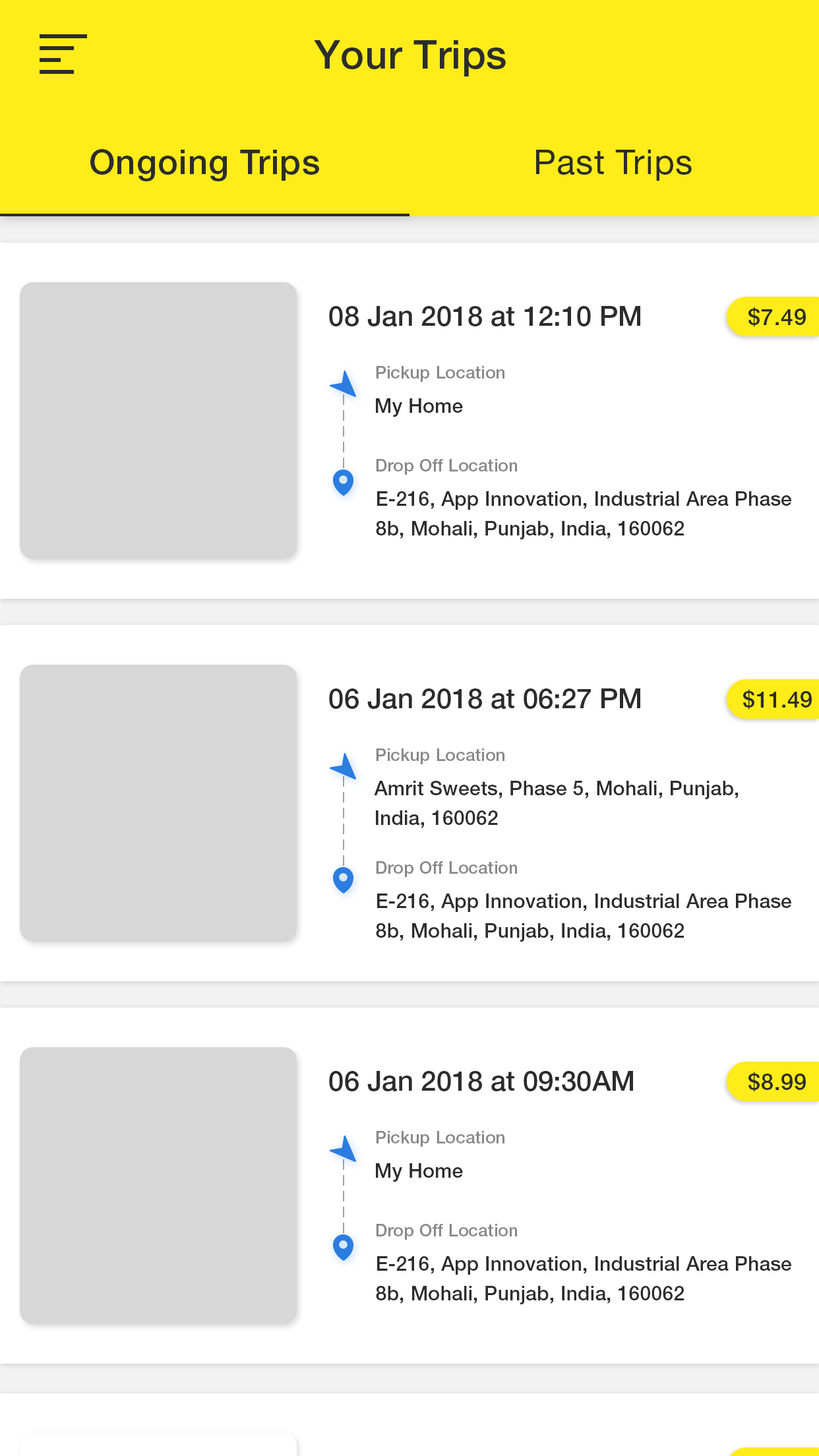
<style>
.page{position:relative;width:819px;height:1456px;background:#ffffff}
.page>*{position:absolute;margin:0}
.t1{font:39.6px "HelveticaNeueLTStd-Md";letter-spacing:0.01em;color:#2c2c2c}
.t2{font:34.3px "HelveticaNeueLTStd-Md";letter-spacing:0.025em;color:#2c2c2c}
.t3{font:34.3px "HelveticaNeueLTStd-Roman";letter-spacing:0.025em;color:#2c2c2c}
.t4{font:27.7px "HelveticaNeueLTStd-Md";color:#2c2c2c}
.t5{font:22.4px "HelveticaNeueLTStd-Md";letter-spacing:0.025em;color:#2c2c2c}
.t6{font:17.1px "HelveticaNeueLTStd-Md";letter-spacing:0.01em;color:#888888}
.t7{font:19.8px "HelveticaNeueLTStd-Md";letter-spacing:0.01em;color:#2c2c2c}
.t8{font:19.8px/29.7px "HelveticaNeueLTStd-Md";letter-spacing:0.01em;color:#2c2c2c}
.t9{font:22.4px "HelveticaNeueLTStd-Md";letter-spacing:0.01em;color:#2c2c2c}
</style>
<div class="page">
<p class="t1" style="left:314px;top:40px;width:192px;height:36px">Your Trips</p>
<p class="t2" style="left:90px;top:149px;width:229px;height:32px">Ongoing Trips</p>
<p class="t3" style="left:536px;top:150px;width:156px;height:31px">Past Trips</p>
<p class="t4" style="left:329px;top:306px;width:311px;height:20px">08 Jan 2018 at 12:10 PM</p>
<p class="t5" style="left:748px;top:307px;width:58px;height:20px">$7.49</p>
<p class="t6" style="left:376px;top:366px;width:128px;height:16px">Pickup Location</p>
<p class="t7" style="left:376px;top:398px;width:87px;height:19px">My Home</p>
<p class="t6" style="left:376px;top:459px;width:141px;height:16px">Drop Off Location</p>
<p class="t8" style="left:376px;top:491px;width:415px;height:48px">E-216, App Innovation, Industrial Area Phase<br>8b, Mohali, Punjab, India, 160062</p>
<p class="t4" style="left:329px;top:688px;width:311px;height:21px">06 Jan 2018 at 06:27 PM</p>
<p class="t9" style="left:743px;top:689px;width:69px;height:21px">$11.49</p>
<p class="t6" style="left:376px;top:748px;width:128px;height:16px">Pickup Location</p>
<p class="t8" style="left:374px;top:781px;width:365px;height:47px">Amrit Sweets, Phase 5, Mohali, Punjab,<br>India, 160062</p>
<p class="t6" style="left:376px;top:861px;width:141px;height:16px">Drop Off Location</p>
<p class="t8" style="left:376px;top:894px;width:415px;height:48px">E-216, App Innovation, Industrial Area Phase<br>8b, Mohali, Punjab, India, 160062</p>
<p class="t4" style="left:329px;top:1071px;width:304px;height:20px">06 Jan 2018 at 09:30AM</p>
<p class="t5" style="left:748px;top:1072px;width:58px;height:20px">$8.99</p>
<p class="t6" style="left:376px;top:1131px;width:128px;height:16px">Pickup Location</p>
<p class="t7" style="left:376px;top:1163px;width:87px;height:19px">My Home</p>
<p class="t6" style="left:376px;top:1224px;width:141px;height:16px">Drop Off Location</p>
<p class="t8" style="left:376px;top:1256px;width:415px;height:48px">E-216, App Innovation, Industrial Area Phase<br>8b, Mohali, Punjab, India, 160062</p>
</div>
